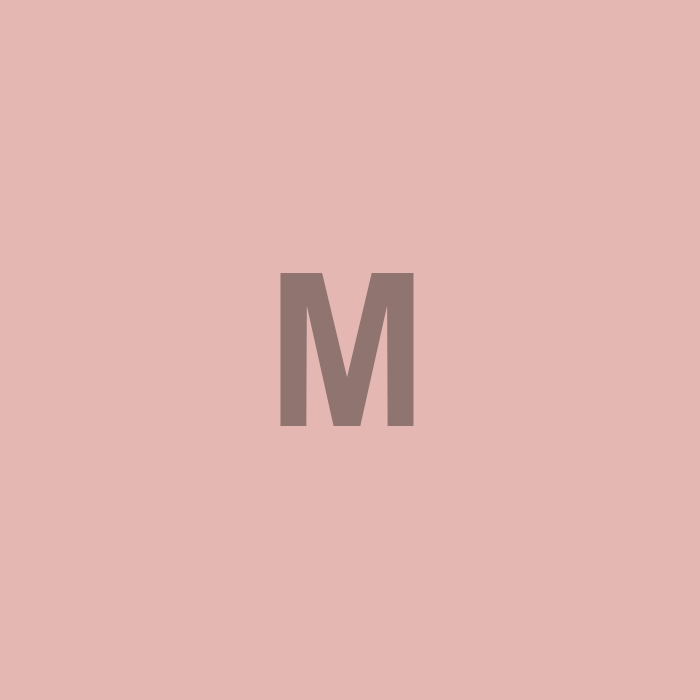
<style>
.page{position:relative;width:700px;height:700px;background:#e4b7b2}
.page>*{position:absolute;margin:0}
.t1{font:213.4px "Arial-BoldMT";color:#907470;scale:0.9 1}
</style>
<div class="page">
<p class="t1" style="left:280px;top:273px;width:134px;height:153px">M</p>
</div>
